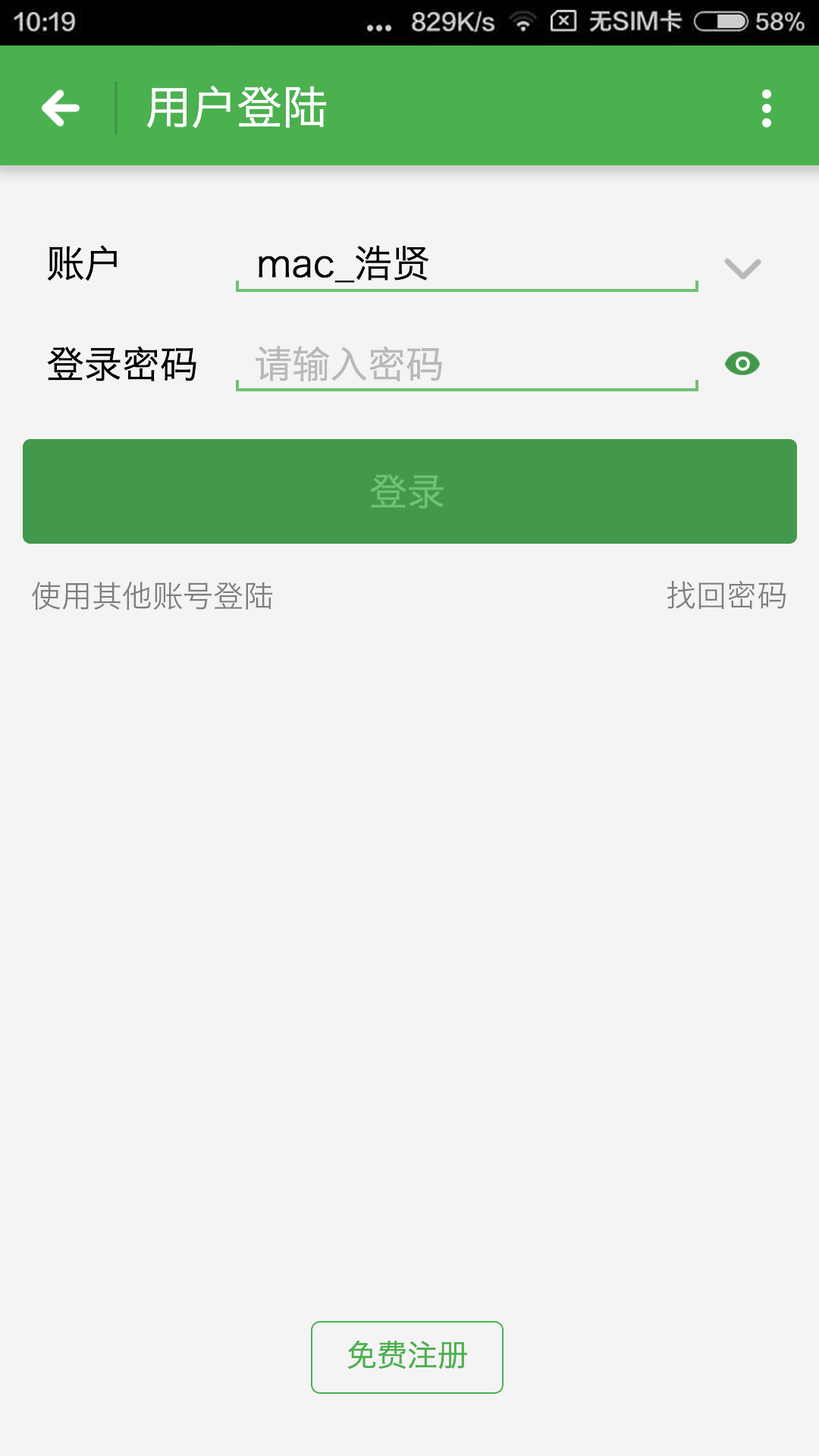
<style>
.page{position:relative;width:819px;height:1456px;background:#f5f4f4}
.page>*{position:absolute;margin:0}
.t1{font:45.5px "HiraginoSansGB-W3";color:#ffffff}
.t2{font:37.9px "HiraginoSansGB-W3";color:#000000}
.t3{font:37.9px "HiraginoSansGB-W3";color:#b8b8b8}
.t4{font:37.9px "HiraginoSansGB-W3";color:#70c172}
.t5{font:30.7px "HiraginoSansGB-W3";color:#7e7e7e}
.t6{font:30.3px "HiraginoSansGB-W3";color:#4bb14f}
</style>
<div class="page">
<p class="t1" style="left:146px;top:86px;width:180px;height:42px">用户登陆</p>
<p class="t2" style="left:47px;top:245px;width:70px;height:36px">账户</p>
<p class="t2" style="left:259px;top:245px;width:170px;height:38px">mac_浩贤</p>
<p class="t2" style="left:47px;top:346px;width:149px;height:35px">登录密码</p>
<p class="t3" style="left:256px;top:346px;width:186px;height:35px">请输入密码</p>
<p class="t4" style="left:370px;top:474px;width:74px;height:35px">登录</p>
<p class="t5" style="left:32px;top:582px;width:241px;height:28px">使用其他账号登陆</p>
<p class="t5" style="left:667px;top:580px;width:119px;height:29px">找回密码</p>
<p class="t6" style="left:347px;top:1340px;width:120px;height:30px">免费注册</p>
</div>
